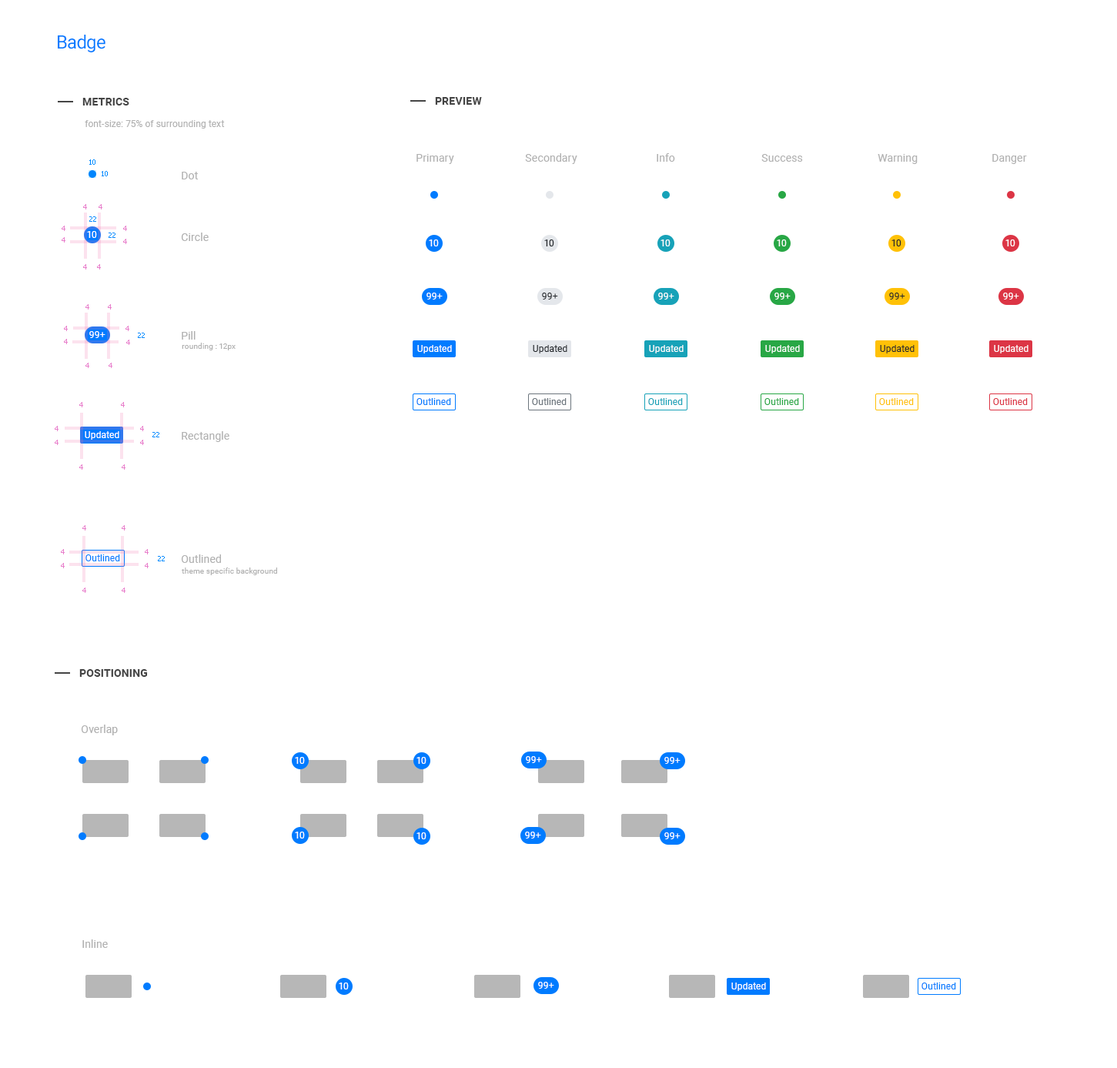
<style>
.page{position:relative;width:1117px;height:1068px;background:#ffffff}
.page>*{position:absolute;margin:0}
.t1{font:18.5px "Roboto-Regular";letter-spacing:-0.025em;color:#007bff}
.t2{font:10.8px "Roboto-Bold";letter-spacing:0.01em;color:#454545;text-transform:uppercase}
.t3{font:9.2px "Roboto-Regular";letter-spacing:0.01em;color:#b1b1b1}
.t4{font:6.9px "Tahoma";color:#008aff}
.t5{font:10.8px "Roboto-Regular";letter-spacing:0.01em;color:#b1b1b1}
.t6{font:6.9px "Tahoma";color:#e87ecb}
.t7{font:9.2px "Roboto-Regular";letter-spacing:0.01em;color:#ffffff}
.t8{font:9.2px "Roboto-Regular";letter-spacing:0.01em;color:#212529}
.t9{font:7.7px "Roboto-Regular";letter-spacing:0.01em;color:#b1b1b1}
.t10{font:9.2px "Roboto-Regular";letter-spacing:0.01em;color:#007bff}
.t11{font:9.2px "Roboto-Regular";letter-spacing:0.01em;color:#6c757d}
.t12{font:9.2px "Roboto-Regular";letter-spacing:0.01em;color:#17a2b8}
.t13{font:9.2px "Roboto-Regular";letter-spacing:0.01em;color:#28a745}
.t14{font:9.2px "Roboto-Regular";letter-spacing:0.01em;color:#ffc107}
.t15{font:9.2px "Roboto-Regular";letter-spacing:0.01em;color:#dc3545}
</style>
<div class="page">
<p class="t1" style="left:58px;top:35px;width:47px;height:17px">Badge</p>
<p class="t2" style="left:82px;top:98px;width:47px;height:7px">metrics</p>
<p class="t2" style="left:435px;top:97px;width:47px;height:8px">preview</p>
<p class="t3" style="left:85px;top:120px;width:140px;height:9px">font-size: 75% of surrounding text</p>
<p class="t4" style="left:89px;top:159px;width:6px;height:6px">10</p>
<p class="t5" style="left:416px;top:154px;width:38px;height:10px">Primary</p>
<p class="t5" style="left:525px;top:153px;width:52px;height:11px">Secondary</p>
<p class="t5" style="left:657px;top:153px;width:18px;height:9px">Info</p>
<p class="t5" style="left:761px;top:154px;width:42px;height:8px">Success</p>
<p class="t5" style="left:878px;top:154px;width:40px;height:10px">Warning</p>
<p class="t5" style="left:992px;top:154px;width:35px;height:10px">Danger</p>
<p class="t4" style="left:102px;top:171px;width:6px;height:5px">10</p>
<p class="t5" style="left:182px;top:172px;width:16px;height:7px">Dot</p>
<p class="t6" style="left:83px;top:204px;width:4px;height:5px">4</p>
<p class="t6" style="left:99px;top:204px;width:3px;height:5px">4</p>
<p class="t4" style="left:89px;top:216px;width:7px;height:6px">22</p>
<p class="t6" style="left:62px;top:226px;width:3px;height:5px">4</p>
<p class="t7" style="left:87px;top:231px;width:10px;height:7px">10</p>
<p class="t4" style="left:109px;top:232px;width:6px;height:6px">22</p>
<p class="t6" style="left:123px;top:226px;width:4px;height:5px">4</p>
<p class="t5" style="left:181px;top:232px;width:28px;height:9px">Circle</p>
<p class="t6" style="left:62px;top:237px;width:3px;height:5px">4</p>
<p class="t6" style="left:123px;top:239px;width:4px;height:5px">4</p>
<p class="t7" style="left:429px;top:239px;width:10px;height:7px">10</p>
<p class="t8" style="left:544px;top:239px;width:10px;height:7px">10</p>
<p class="t7" style="left:660px;top:239px;width:10px;height:7px">10</p>
<p class="t7" style="left:777px;top:239px;width:10px;height:7px">10</p>
<p class="t8" style="left:891px;top:239px;width:10px;height:7px">10</p>
<p class="t7" style="left:1005px;top:239px;width:10px;height:7px">10</p>
<p class="t6" style="left:83px;top:264px;width:4px;height:5px">4</p>
<p class="t6" style="left:97px;top:264px;width:4px;height:5px">4</p>
<p class="t7" style="left:426px;top:293px;width:17px;height:6px">99+</p>
<p class="t8" style="left:542px;top:293px;width:16px;height:6px">99+</p>
<p class="t7" style="left:658px;top:293px;width:16px;height:6px">99+</p>
<p class="t7" style="left:774px;top:293px;width:17px;height:6px">99+</p>
<p class="t8" style="left:889px;top:293px;width:16px;height:6px">99+</p>
<p class="t7" style="left:1003px;top:293px;width:16px;height:6px">99+</p>
<p class="t6" style="left:85px;top:304px;width:4px;height:5px">4</p>
<p class="t6" style="left:108px;top:304px;width:4px;height:5px">4</p>
<p class="t6" style="left:64px;top:326px;width:4px;height:5px">4</p>
<p class="t6" style="left:125px;top:326px;width:4px;height:5px">4</p>
<p class="t6" style="left:64px;top:339px;width:4px;height:5px">4</p>
<p class="t7" style="left:89px;top:331px;width:16px;height:7px">99+</p>
<p class="t6" style="left:126px;top:339px;width:4px;height:6px">4</p>
<p class="t4" style="left:138px;top:333px;width:7px;height:5px">22</p>
<p class="t5" style="left:182px;top:331px;width:14px;height:8px">Pill</p>
<p class="t9" style="left:182px;top:343px;width:54px;height:7px">rounding : 12px</p>
<p class="t7" style="left:417px;top:345px;width:35px;height:8px">Updated</p>
<p class="t8" style="left:533px;top:345px;width:34px;height:8px">Updated</p>
<p class="t7" style="left:649px;top:345px;width:35px;height:8px">Updated</p>
<p class="t7" style="left:765px;top:345px;width:35px;height:8px">Updated</p>
<p class="t8" style="left:880px;top:345px;width:34px;height:8px">Updated</p>
<p class="t7" style="left:994px;top:345px;width:34px;height:8px">Updated</p>
<p class="t6" style="left:85px;top:363px;width:4px;height:5px">4</p>
<p class="t6" style="left:109px;top:363px;width:3px;height:5px">4</p>
<p class="t6" style="left:79px;top:402px;width:4px;height:5px">4</p>
<p class="t6" style="left:121px;top:402px;width:4px;height:5px">4</p>
<p class="t10" style="left:416px;top:398px;width:35px;height:7px">Outlined</p>
<p class="t11" style="left:532px;top:398px;width:35px;height:7px">Outlined</p>
<p class="t12" style="left:648px;top:398px;width:35px;height:7px">Outlined</p>
<p class="t13" style="left:764px;top:398px;width:35px;height:7px">Outlined</p>
<p class="t14" style="left:879px;top:398px;width:35px;height:7px">Outlined</p>
<p class="t15" style="left:993px;top:398px;width:35px;height:7px">Outlined</p>
<p class="t6" style="left:55px;top:426px;width:4px;height:5px">4</p>
<p class="t6" style="left:140px;top:426px;width:4px;height:5px">4</p>
<p class="t7" style="left:85px;top:431px;width:34px;height:9px">Updated</p>
<p class="t4" style="left:152px;top:432px;width:7px;height:5px">22</p>
<p class="t5" style="left:182px;top:431px;width:47px;height:11px">Rectangle</p>
<p class="t6" style="left:55px;top:440px;width:4px;height:5px">4</p>
<p class="t6" style="left:140px;top:440px;width:4px;height:5px">4</p>
<p class="t6" style="left:79px;top:464px;width:4px;height:6px">4</p>
<p class="t6" style="left:122px;top:464px;width:3px;height:6px">4</p>
<p class="t6" style="left:82px;top:525px;width:4px;height:5px">4</p>
<p class="t6" style="left:122px;top:525px;width:3px;height:5px">4</p>
<p class="t6" style="left:61px;top:549px;width:4px;height:5px">4</p>
<p class="t10" style="left:85px;top:554px;width:35px;height:7px">Outlined</p>
<p class="t6" style="left:145px;top:549px;width:4px;height:5px">4</p>
<p class="t4" style="left:158px;top:556px;width:7px;height:5px">22</p>
<p class="t5" style="left:181px;top:554px;width:40px;height:9px">Outlined</p>
<p class="t6" style="left:61px;top:563px;width:4px;height:5px">4</p>
<p class="t6" style="left:145px;top:563px;width:4px;height:5px">4</p>
<p class="t9" style="left:182px;top:567px;width:95px;height:8px">theme specific background</p>
<p class="t6" style="left:82px;top:587px;width:4px;height:6px">4</p>
<p class="t6" style="left:122px;top:587px;width:3px;height:6px">4</p>
<p class="t2" style="left:79px;top:669px;width:69px;height:8px">positioning</p>
<p class="t5" style="left:81px;top:724px;width:37px;height:11px">Overlap</p>
<p class="t7" style="left:295px;top:757px;width:10px;height:7px">10</p>
<p class="t7" style="left:416px;top:757px;width:10px;height:7px">10</p>
<p class="t7" style="left:526px;top:756px;width:16px;height:7px">99+</p>
<p class="t7" style="left:664px;top:757px;width:16px;height:7px">99+</p>
<p class="t7" style="left:295px;top:831px;width:10px;height:7px">10</p>
<p class="t7" style="left:416px;top:832px;width:10px;height:7px">10</p>
<p class="t7" style="left:525px;top:831px;width:16px;height:7px">99+</p>
<p class="t7" style="left:664px;top:832px;width:16px;height:7px">99+</p>
<p class="t5" style="left:82px;top:939px;width:26px;height:9px">Inline</p>
<p class="t7" style="left:339px;top:982px;width:10px;height:7px">10</p>
<p class="t7" style="left:538px;top:981px;width:16px;height:7px">99+</p>
<p class="t7" style="left:731px;top:982px;width:35px;height:9px">Updated</p>
<p class="t10" style="left:921px;top:982px;width:35px;height:7px">Outlined</p>
</div>
